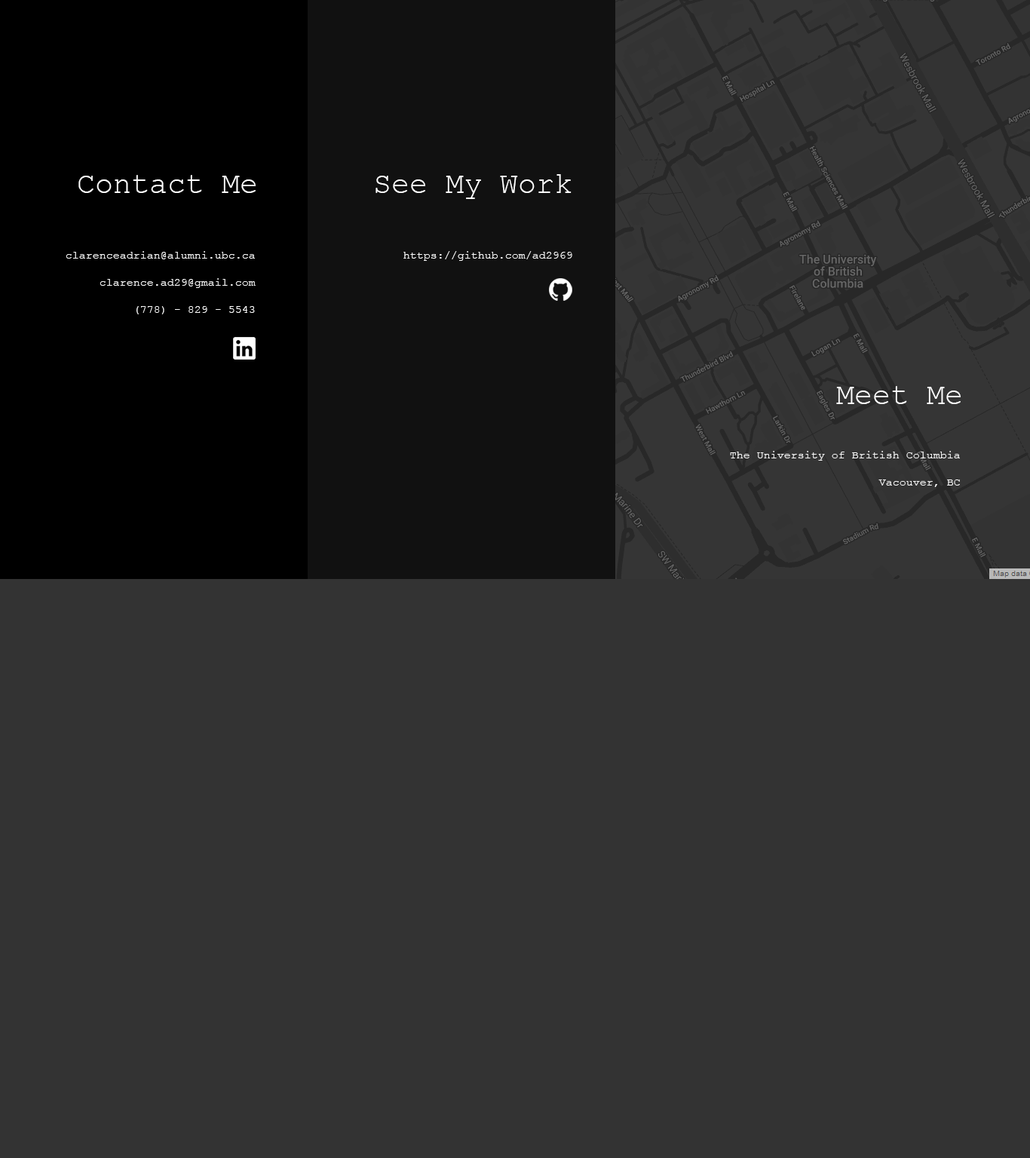
<style>
.page{position:relative;width:1030px;height:1158px;background:#333333}
.page>*{position:absolute;margin:0}
.t1{font:30.2px "CourierNewPSMT";color:#ffffff}
.t2{font:11.3px "CourierNewPSMT";color:#ffffff}
</style>
<div class="page">
<p class="t1" style="left:78px;top:175px;width:178px;height:18px">Contact Me</p>
<p class="t1" style="left:375px;top:174px;width:196px;height:25px">See My Work</p>
<p class="t2" style="left:66px;top:251px;width:190px;height:63px;text-align:right">clarenceadrian@alumni.ubc.ca<br><br>clarence.ad29@gmail.com<br><br>(778) - 829 - 5543</p>
<p class="t2" style="left:403px;top:251px;width:169px;height:10px">https://github.com/ad2969</p>
<p class="t1" style="left:836px;top:386px;width:124px;height:18px">Meet Me</p>
<p class="t2" style="left:730px;top:451px;width:230px;height:36px;text-align:right">The University of British Columbia<br><br>Vacouver, BC</p>
</div>
